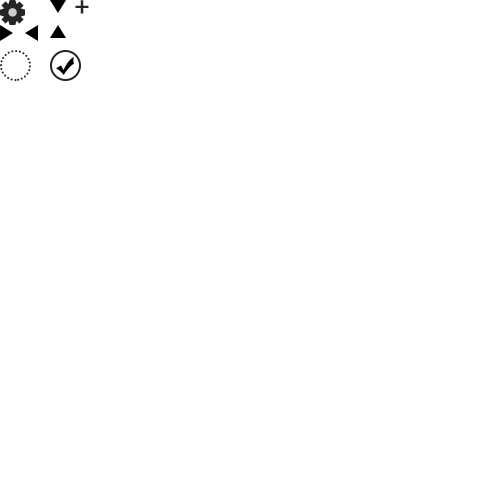
<style>
.page{position:relative;width:500px;height:500px;background:#ffffff}
.page>*{position:absolute;margin:0}
.t1{font:25px "MyriadPro-Bold";color:#252525}
</style>
<div class="page">
<p class="t1" style="left:75px;top:0px;width:14px;height:14px">+</p>
</div>
